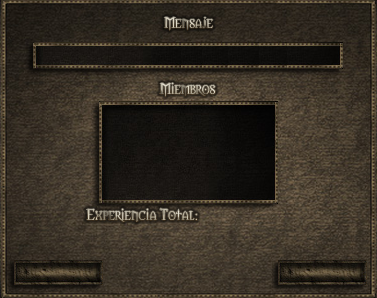
<style>
.page{position:relative;width:377px;height:298px}
.page>*{position:absolute;margin:0}
.t1{font:14px "Morpheus";color:#dbd6c2}
.t2{font:14px "Morpheus"}
</style>
<div class="page">
<p class="t1" style="left:164px;top:17px;width:49px;height:14px">Mensaje</p>
<p class="t2" style="left:159px;top:82px;width:56px;height:15px">Miembros</p>
<p class="t2" style="left:86px;top:208px;width:111px;height:14px">Experiencia Total:</p>
</div>
